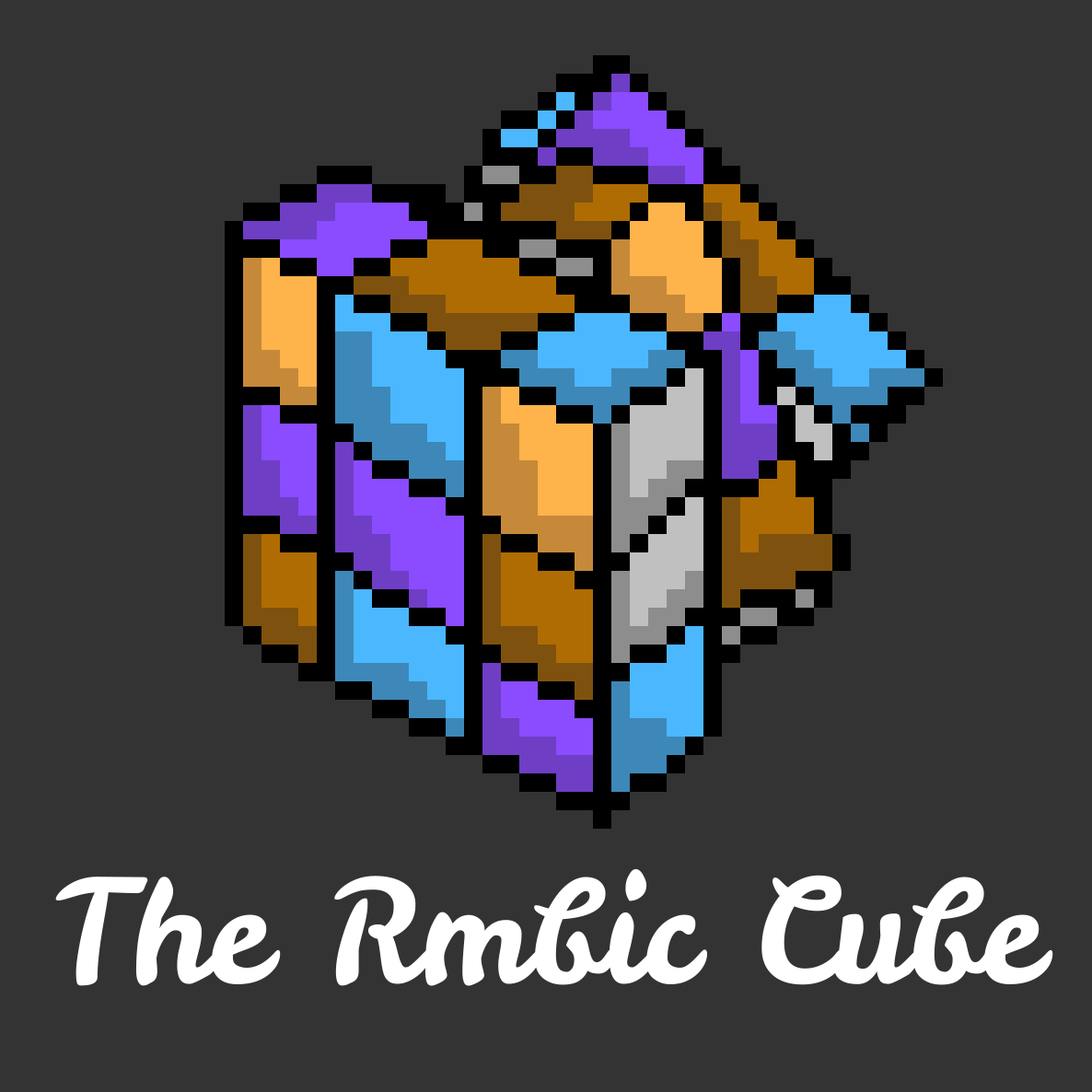
<style>
.page{position:relative;width:1092px;height:1092px;background:#333333}
.page>*{position:absolute;margin:0}
.t1{font:142.7px "LeckerliOne-Regular";color:#ffffff}
</style>
<div class="page">
<p class="t1" style="left:55px;top:869px;width:998px;height:117px">The Rmbic Cube</p>
</div>
